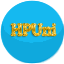
<style>
.page{position:relative;width:64px;height:64px;background:#15b9f0}
.page>*{position:absolute;margin:0}
.t1{font:15.5px "BookmanOldStyle";scale:0.92 1}
</style>
<div class="page">
<p class="t1" style="left:11px;top:24px;width:45px;height:12px">HPUni</p>
</div>
